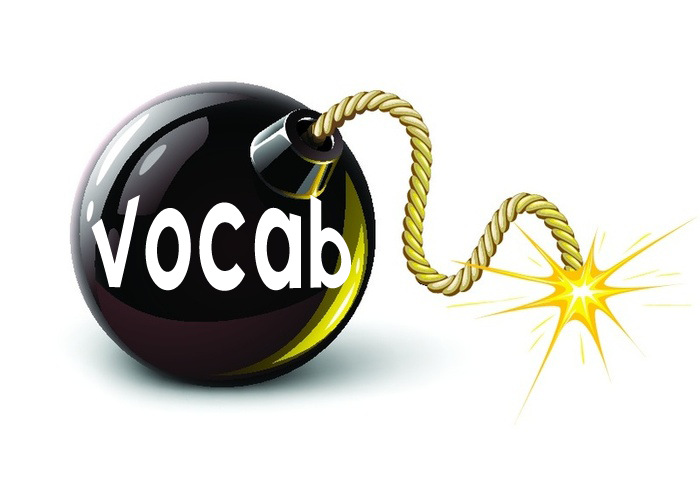
<style>
.page{position:relative;width:700px;height:481px;background:#ffffff}
.page>*{position:absolute;margin:0}
.t1{font:80px "CenturyGothic-Bold";color:#ffffff}
</style>
<div class="page">
<p class="t1" style="left:91px;top:195px;width:260px;height:96px">Vocab</p>
</div>
